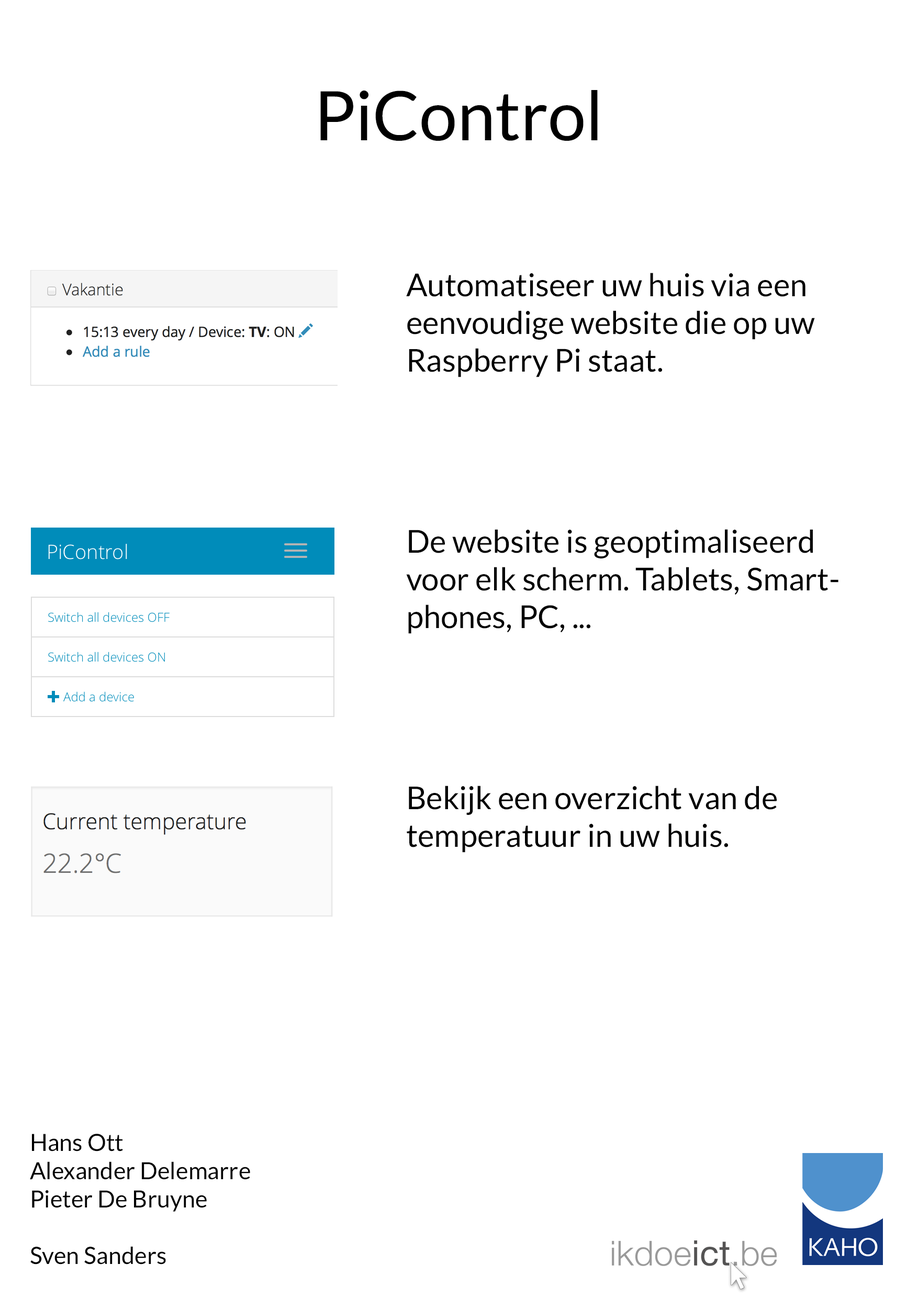
<style>
.page{position:relative;width:918px;height:1298px;background:#ffffff}
.page>*{position:absolute;margin:0}
.t1{font:68.1px "Lato-Regular";color:#000000}
.t2{font:31.4px "Lato-Regular";color:#000000}
.t3{font:23.6px "Lato-Regular";color:#000000}
</style>
<div class="page">
<p class="t1" style="left:320px;top:90px;width:278px;height:51px">PiControl</p>
<p class="t2" style="left:406px;top:273px;width:409px;height:104px">Automatiseer uw huis via een <br>eenvoudige website die op uw Raspberry Pi staat.</p>
<p class="t2" style="left:406px;top:529px;width:433px;height:105px">De website is geoptimaliseerd voor elk scherm. Tablets, Smartphones, PC, ...</p>
<p class="t2" style="left:407px;top:786px;width:370px;height:67px">Bekijk een overzicht van de <br>temperatuur in uw huis.</p>
<p class="t3" style="left:30px;top:1134px;width:220px;height:131px">Hans Ott<br>Alexander Delemarre<br>Pieter De Bruyne<br><br>Sven Sanders</p>
</div>
